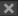
<style>
.page{position:relative;width:18px;height:16px;background:#414141}
.page>*{position:absolute;margin:0}
.t1{font:22px "Arial-BoldMT";letter-spacing:0.01em;color:#9b9b9b}
</style>
<div class="page">
<p class="t1" style="left:3px;top:3px;width:11px;height:11px">×</p>
</div>
